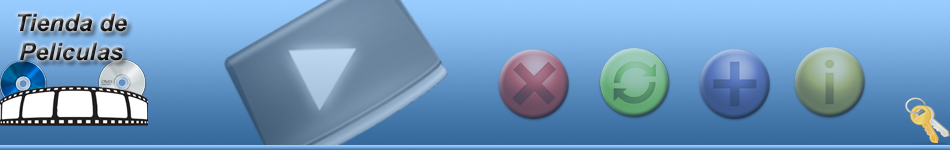
<style>
.page{position:relative;width:950px;height:150px}
.page>*{position:absolute;margin:0}
.t1{font:24px "Arial-BoldItalicMT";color:#201e1f}
</style>
<div class="page">
<p class="t1" style="left:17px;top:13px;width:110px;height:48px;text-align:center">Tienda de<br>Peliculas</p>
</div>
